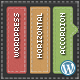
<style>
.page{position:relative;width:80px;height:80px}
.page>*{position:absolute;margin:0}
.t1{font:8px/23px "04b03";color:#ffffff}
</style>
<div class="page">
<p class="t1" style="left:14px;top:13px;width:51px;height:45px;text-align:right;rotate:-90deg">WORDPRESS<br>HORIZONTAL<br>ACCORDION</p>
</div>
